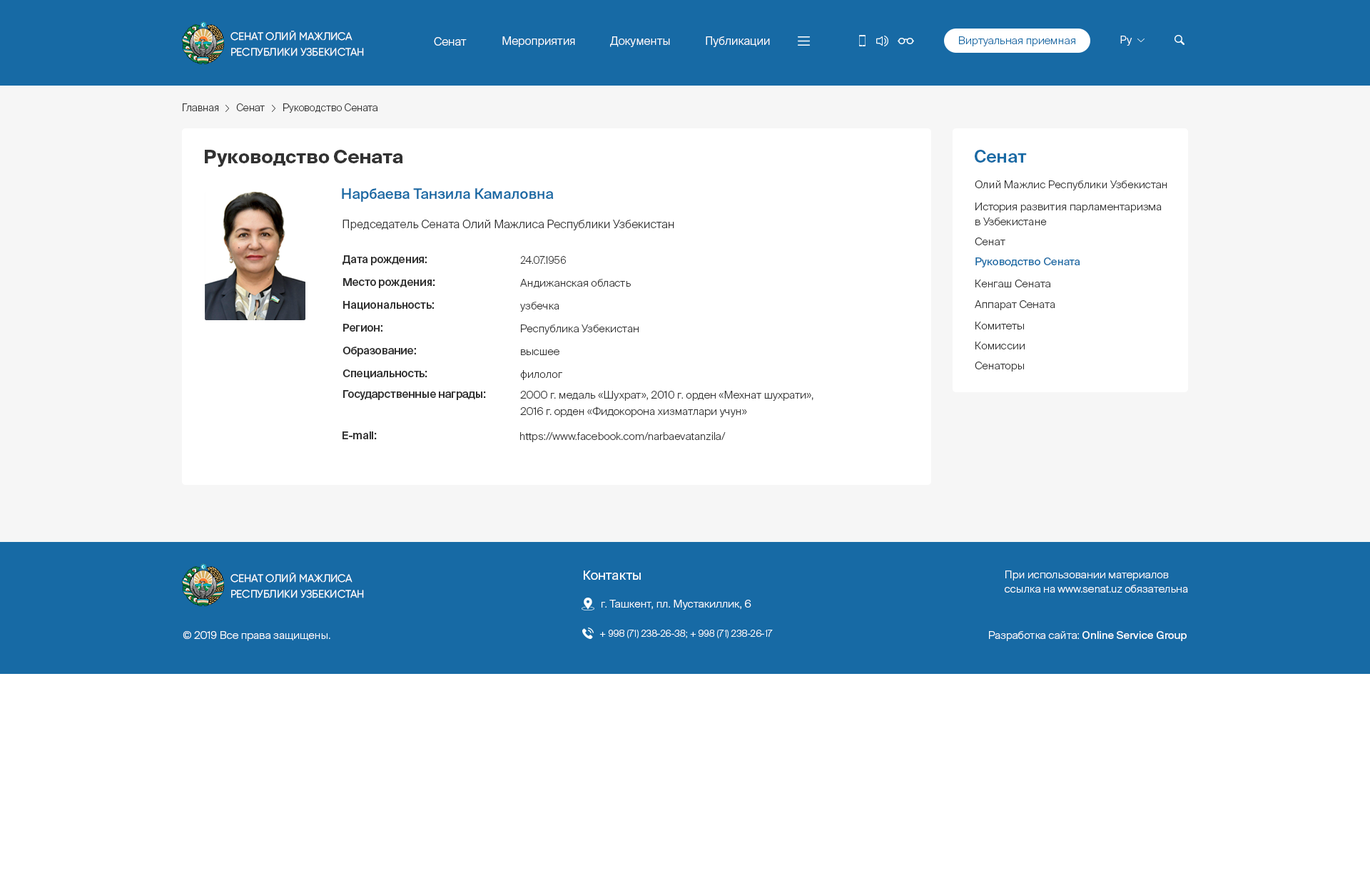
<style>
.page{position:relative;width:1370px;height:870px;background:#ffffff}
.page>*{position:absolute;margin:0}
.t1{font:10.7px/7.1px "Gilroy-Regular";color:#ffffff;text-transform:uppercase}
.t2{font:11.4px "SuisseIntl-Light";color:#ffffff}
.t3{font:10.7px "SuisseIntl-Light";color:#176aa5}
.t4{font:10.7px "SuisseIntl-Light";color:#ffffff}
.t5{font:10px "SuisseIntl-Light";color:#323232}
.t6{font:18.6px "SuisseIntl-Bold";color:#323232}
.t7{font:17.1px "SuisseIntl-SemiBold";color:#176aa5}
.t8{font:10.7px "SuisseIntl-Light";color:#323232}
.t9{font:14.3px "SuisseIntl-Medium";color:#176aa5}
.t10{font:10.7px/6.4px "SuisseIntl-Light";color:#323232}
.t11{font:11.4px "SuisseIntl-Light";color:#323232}
.t12{font:10.7px "SuisseIntl-Medium";color:#323232}
.t13{font:10.7px "SuisseIntl-Regular";color:#176aa5}
.t14{font:10.7px/7.8px "SuisseIntl-Light";color:#323232}
.t15{font:12.8px "SuisseIntl-Regular";color:#fefefe}
.t16{font:10.7px/5.7px "SuisseIntl-Light";color:#fefefe}
.t17{font:9.3px "SuisseIntl-Light";color:#ffffff}
.t18{font:10.7px "SuisseIntl-Regular";color:#ffffff}
</style>
<div class="page">
<p class="t1" style="left:230px;top:31px;width:134px;height:25px">Сенат Олий Мажлиса<br>Республики Узбекистан</p>
<p class="t2" style="left:434px;top:37px;width:33px;height:9px">Сенат</p>
<p class="t2" style="left:502px;top:36px;width:73px;height:11px">Мероприятия</p>
<p class="t2" style="left:610px;top:36px;width:60px;height:11px">Документы</p>
<p class="t2" style="left:706px;top:36px;width:64px;height:11px">Публикации</p>
<p class="t3" style="left:959px;top:36px;width:116px;height:10px">Виртуальная приемная</p>
<p class="t4" style="left:1120px;top:36px;width:12px;height:10px">Ру</p>
<p class="t5" style="left:183px;top:103px;width:36px;height:8px">Главная</p>
<p class="t5" style="left:236px;top:103px;width:29px;height:8px">Сенат</p>
<p class="t5" style="left:283px;top:103px;width:94px;height:10px">Руководство Сената</p>
<p class="t6" style="left:205px;top:150px;width:198px;height:17px">Руководство Сената</p>
<p class="t7" style="left:975px;top:150px;width:52px;height:13px">Сенат</p>
<p class="t8" style="left:975px;top:181px;width:192px;height:10px">Олий Мажлис Республики Узбекистан</p>
<p class="t9" style="left:342px;top:188px;width:212px;height:14px">Нарбаева Танзила Камаловна</p>
<p class="t10" style="left:975px;top:203px;width:187px;height:22px">История развития парламентаризма <br>в Узбекистане</p>
<p class="t11" style="left:342px;top:219px;width:332px;height:11px">Председатель Сената Олий Мажлиса Республики Узбекистан</p>
<p class="t8" style="left:975px;top:238px;width:30px;height:7px">Сенат</p>
<p class="t12" style="left:342px;top:255px;width:85px;height:10px">Дата рождения:</p>
<p class="t5" style="left:520px;top:256px;width:46px;height:8px">24.07.1956</p>
<p class="t13" style="left:975px;top:258px;width:105px;height:10px">Руководство Сената</p>
<p class="t12" style="left:343px;top:278px;width:92px;height:10px">Место рождения:</p>
<p class="t8" style="left:520px;top:279px;width:111px;height:9px">Андижанская область</p>
<p class="t8" style="left:975px;top:280px;width:75px;height:8px">Кенгаш Сената</p>
<p class="t12" style="left:343px;top:301px;width:91px;height:9px">Национальность:</p>
<p class="t8" style="left:520px;top:302px;width:39px;height:10px">узбечка</p>
<p class="t8" style="left:975px;top:300px;width:80px;height:10px">Аппарат Сената</p>
<p class="t12" style="left:343px;top:324px;width:39px;height:8px">Регион:</p>
<p class="t8" style="left:521px;top:325px;width:118px;height:10px">Республика Узбекистан</p>
<p class="t8" style="left:975px;top:322px;width:49px;height:8px">Комитеты</p>
<p class="t8" style="left:975px;top:342px;width:50px;height:8px">Комиссии</p>
<p class="t12" style="left:342px;top:347px;width:74px;height:10px">Образование:</p>
<p class="t8" style="left:521px;top:350px;width:38px;height:5px">высшее</p>
<p class="t8" style="left:975px;top:362px;width:49px;height:10px">Сенаторы</p>
<p class="t12" style="left:342px;top:370px;width:85px;height:9px">Специальность:</p>
<p class="t8" style="left:520px;top:370px;width:42px;height:10px">филолог</p>
<p class="t12" style="left:343px;top:390px;width:143px;height:10px">Государственные награды:</p>
<p class="t14" style="left:520px;top:391px;width:293px;height:26px">2000 г. медаль «Шухрат», 2010 г. орден «Мехнат шухрати», <br>2016 г. орден «Фидокорона хизматлари учун»</p>
<p class="t12" style="left:342px;top:432px;width:35px;height:8px">E-mail:</p>
<p class="t8" style="left:520px;top:432px;width:206px;height:10px">https://www.facebook.com/narbaevatanzila/</p>
<p class="t1" style="left:230px;top:573px;width:134px;height:26px">Сенат Олий Мажлиса<br>Республики Узбекистан</p>
<p class="t15" style="left:584px;top:571px;width:57px;height:9px">Контакты</p>
<p class="t16" style="left:1005px;top:571px;width:183px;height:22px">При использовании материалов <br>ссылка на www.senat.uz обязательна</p>
<p class="t4" style="left:601px;top:600px;width:150px;height:10px">г. Ташкент, пл. Мустакиллик, 6</p>
<p class="t4" style="left:183px;top:631px;width:147px;height:10px">© 2019 Все права защищены.</p>
<p class="t17" style="left:599px;top:630px;width:174px;height:9px">+ 998 (71) 238-26-38; + 998 (71) 238-26-17</p>
<p class="t18" style="left:989px;top:631px;width:198px;height:10px"><span class="t4">Разработка сайта: </span>Online Service Group</p>
</div>
